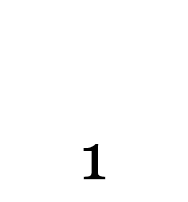
<style>
.page{position:relative;width:188px;height:202px;background:#ffffff}
.page>*{position:absolute;margin:0}
.t1{font:64.7px "Georgia";color:#000000}
</style>
<div class="page">
<p class="t1" style="left:83px;top:144px;width:23px;height:36px">1</p>
</div>
